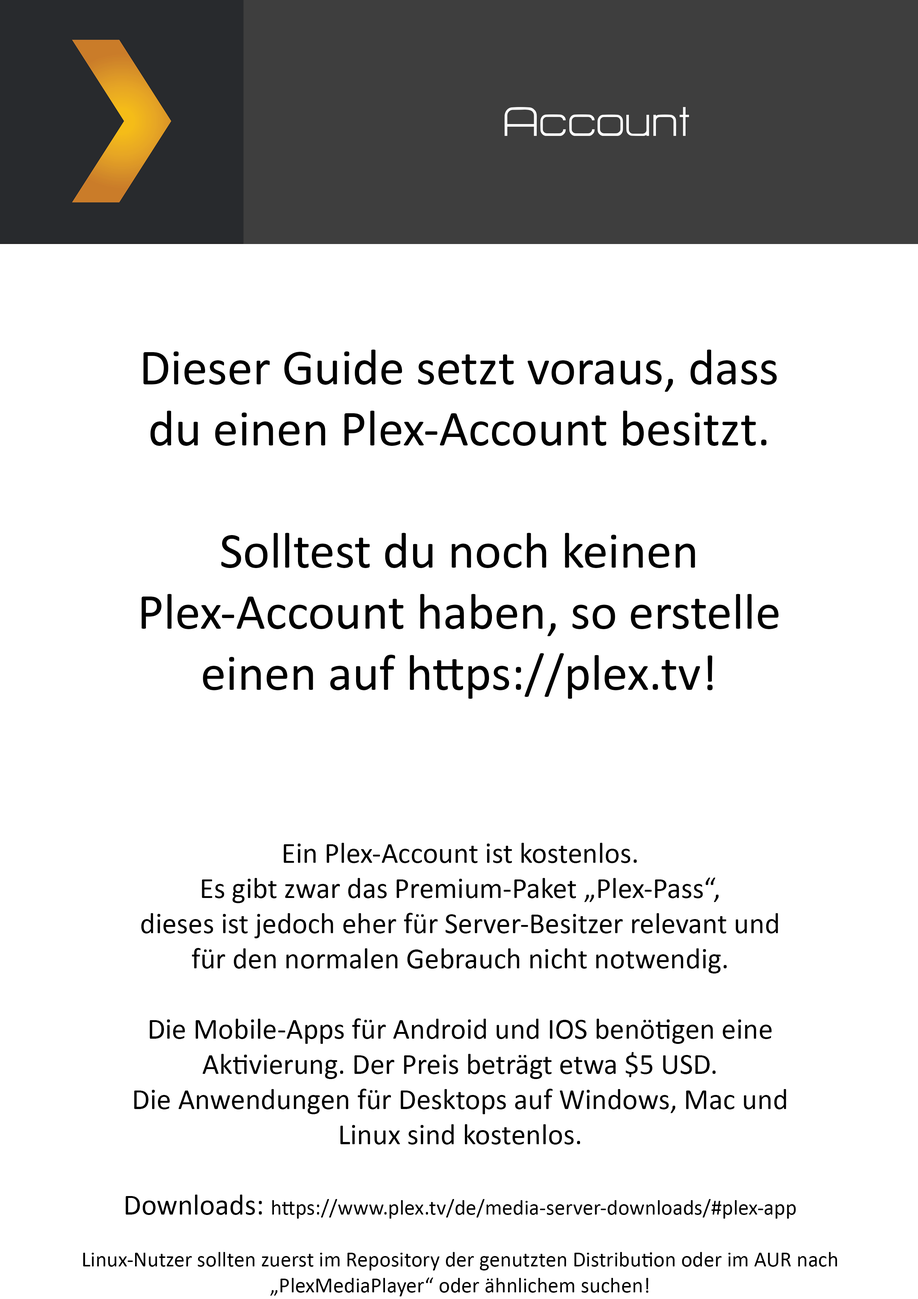
<style>
.page{position:relative;width:918px;height:1299px;background:#ffffff}
.page>*{position:absolute;margin:0}
.t1{font:50.9px "HURTMOLDPersonalUse-Regular";color:#ffffff}
.t2{font:50.9px "Calibri";color:#000000}
.t3{font:29.3px "Calibri";color:#000000}
.t4{font:21.6px "Calibri";color:#000000}
</style>
<div class="page">
<p class="t1" style="left:505px;top:107px;width:184px;height:29px">Account</p>
<p class="t2" style="left:141px;top:349px;width:638px;height:350px;text-align:center">Dieser Guide setzt voraus, dass<br>du einen Plex-Account besitzt.<br><br>Solltest du noch keinen<br>Plex-Account haben, so erstelle<br>einen auf https://plex.tv!</p>
<p class="t3" style="left:83px;top:843px;width:754px;height:453px;text-align:center">Ein Plex-Account ist kostenlos.<br>Es gibt zwar das Premium-Paket „Plex-Pass“,<br>dieses ist jedoch eher für Server-Besitzer relevant und<br>für den normalen Gebrauch nicht notwendig.<br><br>Die Mobile-Apps für Android und IOS benötigen eine<br>Aktivierung. Der Preis beträgt etwa $5 USD.<br>Die Anwendungen für Desktops auf Windows, Mac und<br>Linux sind kostenlos.<br><br>Downloads: <span class="t4">https://www.plex.tv/de/media-server-downloads/#plex-app<br><br>Linux-Nutzer sollten zuerst im Repository der genutzten Distribution oder im AUR nach<br>„PlexMediaPlayer“ oder ähnlichem suchen!</span></p>
</div>
